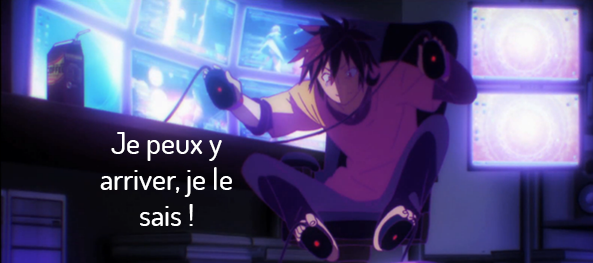
<style>
.page{position:relative;width:593px;height:263px}
.page>*{position:absolute;margin:0}
.t1{font:30px "Dosis-Medium";color:#ffffff}
</style>
<div class="page">
<p class="t1" style="left:100px;top:132px;width:132px;height:94px;text-align:center">Je peux y<br>arriver, je le sais !</p>
</div>
